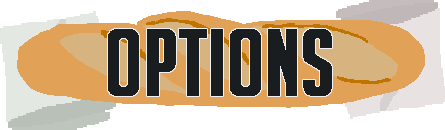
<style>
.page{position:relative;width:445px;height:130px;background:#ffffff}
.page>*{position:absolute;margin:0}
.t1{font:91.7px "BigNoodleTitling";color:#1a1d1f;font-weight:bold;scale:0.97 1}
</style>
<div class="page">
<p class="t1" style="left:108px;top:29px;width:224px;height:67px">Options</p>
</div>
